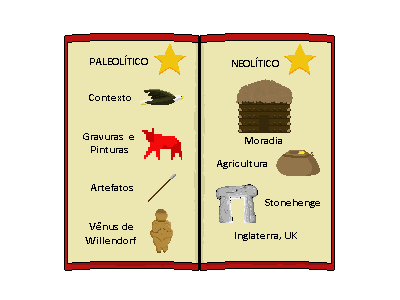
<style>
.page{position:relative;width:400px;height:300px;background:#ffffff}
.page>*{position:absolute;margin:0}
.t1{font:11px "Calibri-Bold";color:#010101}
.t2{font:11px "Calibri-Bold";color:#000000}
</style>
<div class="page">
<p class="t1" style="left:90px;top:55px;width:58px;height:10px">PALEOLÍTICO</p>
<p class="t1" style="left:232px;top:57px;width:47px;height:10px">NEOLÍTICO</p>
<p class="t1" style="left:89px;top:94px;width:42px;height:7px">Contexto</p>
<p class="t1" style="left:83px;top:133px;width:51px;height:20px;text-align:center">Gravuras   e <br>Pinturas</p>
<p class="t2" style="left:245px;top:137px;width:37px;height:7px">Moradia</p>
<p class="t2" style="left:217px;top:160px;width:50px;height:9px">Agricultura</p>
<p class="t2" style="left:91px;top:184px;width:42px;height:7px">Artefatos</p>
<p class="t2" style="left:265px;top:199px;width:55px;height:9px">Stonehenge</p>
<p class="t1" style="left:85px;top:222px;width:51px;height:22px;text-align:center">Vênus  de <br>Willendorf</p>
<p class="t2" style="left:235px;top:232px;width:62px;height:9px">Inglaterra, UK</p>
</div>
